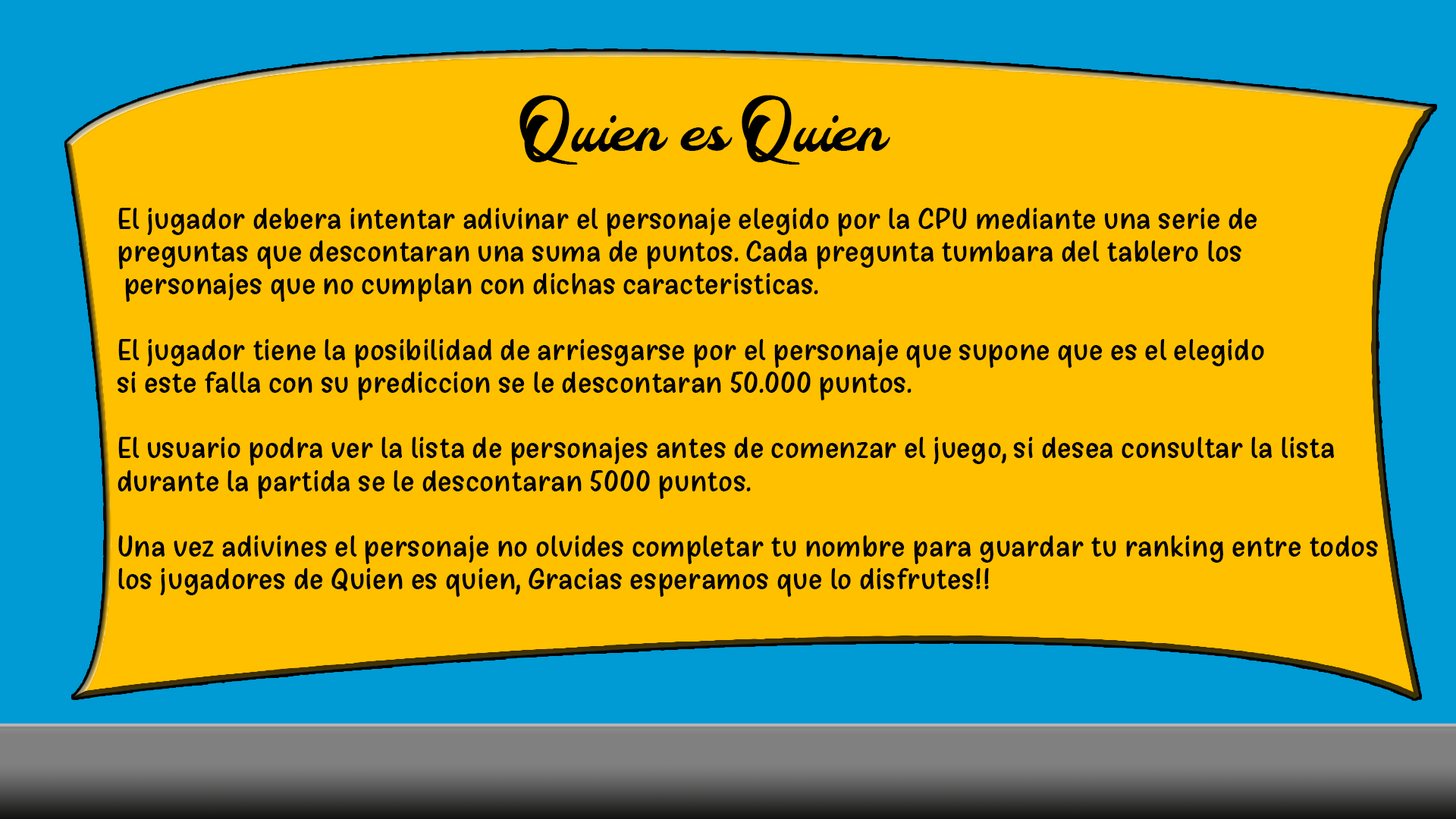
<style>
.page{position:relative;width:1456px;height:819px;background:#ffc000}
.page>*{position:absolute;margin:0}
.t1{font:54.7px "FantasticPersonalUse";color:#000000}
.t2{font:27.3px "GirlsMarks";color:#000000}
</style>
<div class="page">
<p class="t1" style="left:519px;top:95px;width:371px;height:70px">Quien es Quien</p>
<p class="t2" style="left:117px;top:208px;width:1261px;height:389px">El jugador debera intentar adivinar el personaje elegido por la CPU mediante una serie de <br>preguntas que descontaran una suma de puntos. Cada pregunta tumbara del tablero los<br> personajes que no cumplan con dichas caracteristicas.<br><br>El jugador tiene la posibilidad de arriesgarse por el personaje que supone que es el elegido<br>si este falla con su prediccion se le descontaran 50.000 puntos.<br><br>El usuario podra ver la lista de personajes antes de comenzar el juego, si desea consultar la lista durante la partida se le descontaran 5000 puntos.<br><br>Una vez adivines el personaje no olvides completar tu nombre para guardar tu ranking entre todos<br>los jugadores de Quien es quien, Gracias esperamos que lo disfrutes!!</p>
</div>
